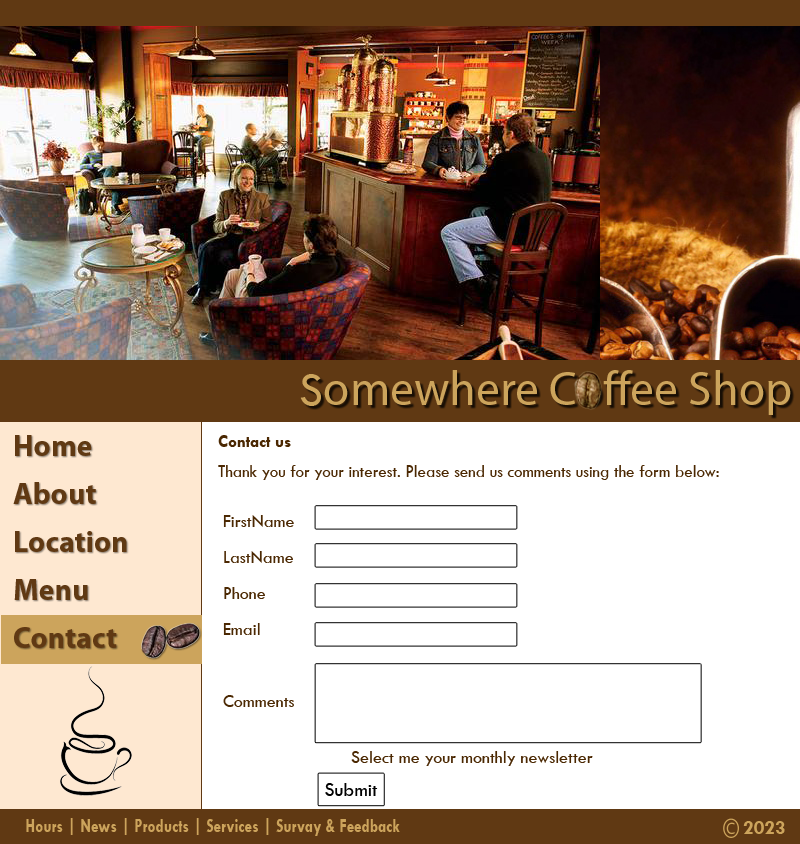
<style>
.page{position:relative;width:800px;height:844px;background:#ffffff}
.page>*{position:absolute;margin:0}
.t1{font:48px "MyriadPro-Regular";color:#cca45c}
.t2{font:48px "TwCenMT-Regular";color:#cca45c}
.t3{font:30px/48px "MyriadPro-Bold";color:#603913}
.t4{font:18px/15px "TwCenMT-Regular";color:#4b2802;scale:0.94 1}
.t5{font:18px/15px "TwCenMT-Bold";color:#4b2802;scale:0.94 1}
.t6{font:18px/18px "TwCenMT-Regular";color:#4b2802}
.t7{font:18px "TwCenMT-Regular";color:#4b2802}
.t8{font:20px "TwCenMT-Regular";color:#010101}
.t9{font:20px "TwCenMT-Bold";color:#cca45c;scale:0.77 1}
.t10{font:20px "TwCenMT-Bold";color:#cca45c}
</style>
<div class="page">
<p class="t1" style="left:300px;top:370px;width:491px;height:45px"><span class="t2">S</span>omewhere Coffee Shop</p>
<p class="t3" style="left:13px;top:435px;width:114px;height:213px">Home<br>About<br>Location<br>Menu<br>Contact</p>
<p class="t4" style="left:218px;top:435px;width:501px;height:45px"><span class="t5">Contact us<br></span><br>Thank you for your interest. Please send us comments using the form below:</p>
<p class="t6" style="left:223px;top:515px;width:71px;height:192px">FirstName<br><br>LastName<br><br>Phone<br><br>Email<br><br><br><br>Comments<br><br><br>Comments</p>
<p class="t7" style="left:351px;top:751px;width:242px;height:15px">Select me your monthly newsletter</p>
<p class="t8" style="left:325px;top:783px;width:53px;height:13px">Submit</p>
<p class="t9" style="left:26px;top:818px;width:374px;height:18px">Hours | News | Products | Services | Survay &amp; Feedback</p>
<p class="t10" style="left:743px;top:821px;width:42px;height:13px">2023</p>
</div>
